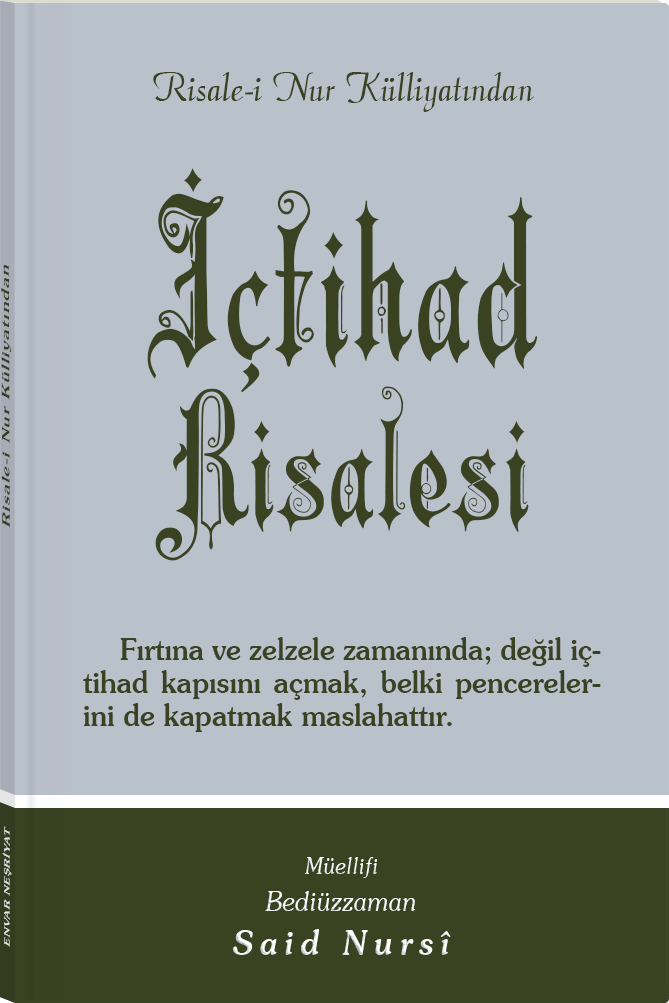
<style>
.page{position:relative;width:669px;height:1003px;background:#b9c1cb}
.page>*{position:absolute;margin:0}
.t1{font:45.3px "Barla © 072 Aria ScriptScriptSSi";color:#3a4222;scale:0.94 1}
.t2{font:177.2px/165.9px "Barla © 001 Liva Nur";letter-spacing:-0.001em;color:#3a4222;scale:0.93 1}
.t3{font:216.2px/192.9px "Barla © 001 Liva Nur";letter-spacing:-0.001em;color:#3a4222;scale:0.93 1}
.t4{font:11.4px "Souvenir-Medium";letter-spacing:0.08em;color:#3a4222;scale:1.65 1}
.t5{font:30.3px/33px "Souvenir-Medium";color:#3a4222;scale:0.92 1}
.t6{font:8.3px "Souvenir-Medium";letter-spacing:0.08em;color:#e5e5e5;scale:1.43 1}
.t7{font:27.1px/37.8px "Souvenir-LightItalic";color:#ffffff;scale:0.92 1}
.t8{font:22.8px/39.8px "Souvenir-LightItalic";color:#ffffff;scale:0.92 1}
.t9{font:33.9px/43.8px "Souvenir-MediumItalic";letter-spacing:0.2em;color:#ffffff;scale:0.92 1}
</style>
<div class="page">
<p class="t1" style="left:153px;top:72px;width:381px;height:40px">Risale-i Nur Külliyatından</p>
<p class="t2" style="left:147px;top:168px;width:391px;height:393px;text-align:center"><span class="t3">İçtihad<br></span>Risalesi</p>
<p class="t4" style="left:1px;top:265px;width:10px;height:263px;rotate:-90deg">Risale-i Nur Külliyatından</p>
<p class="t5" style="left:83px;top:637px;width:518px;height:95px;text-align:justify">Fırtına ve zelzele zamanında; değil içtihad kapısını açmak, belki pencerelerini de kapatmak maslahattır.</p>
<p class="t6" style="left:2px;top:826px;width:10px;height:121px;rotate:-90deg">ENVAR NEŞRİYAT</p>
<p class="t7" style="left:233px;top:857px;width:218px;height:98px;text-align:center"><span class="t8">Müellifi<br></span>Bediüzzaman<br><span class="t9">Said Nursî</span></p>
</div>
